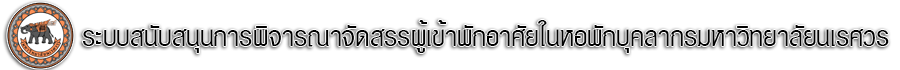
<style>
.page{position:relative;width:900px;height:70px;background:#ffffff}
.page>*{position:absolute;margin:0}
.t1{font:40px "PSLDisplay";color:#000000}
</style>
<div class="page">
<p class="t1" style="left:82px;top:20px;width:807px;height:33px">ระบบสนับสนุนการพิจารณาจัดสรรผู้เข้าพักอาศัยในหอพักบุคลากรมหาวิทยาลัยนเรศวร</p>
</div>
